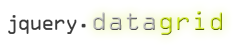
<style>
.page{position:relative;width:250px;height:54px;background:#ffffff}
.page>*{position:absolute;margin:0}
.t1{font:27.6px "OCRAExtended"}
</style>
<div class="page">
<p class="t1" style="left:93px;top:11px;width:129px;height:24px">datagrid</p>
</div>
